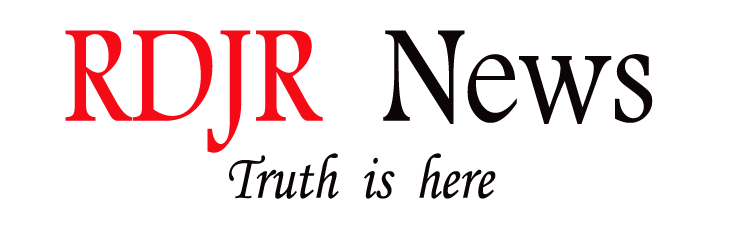
<style>
.page{position:relative;width:740px;height:248px;background:#ffffff}
.page>*{position:absolute;margin:0}
.t1{font:64.1px "MonotypeCorsiva";color:#0c0505;scale:0.86 1}
.t2{font:144.3px "FootlightMTLight";color:#f50b16;scale:0.86 1}
.t3{font:144.3px "FootlightMTLight";color:#0c0505;scale:0.86 1}
</style>
<div class="page">
<p class="t1" style="left:65px;top:30px;width:588px;height:169px;text-align:center"><span class="t2">RDJR</span><span class="t3">  News<br></span>Truth  is  here</p>
</div>
